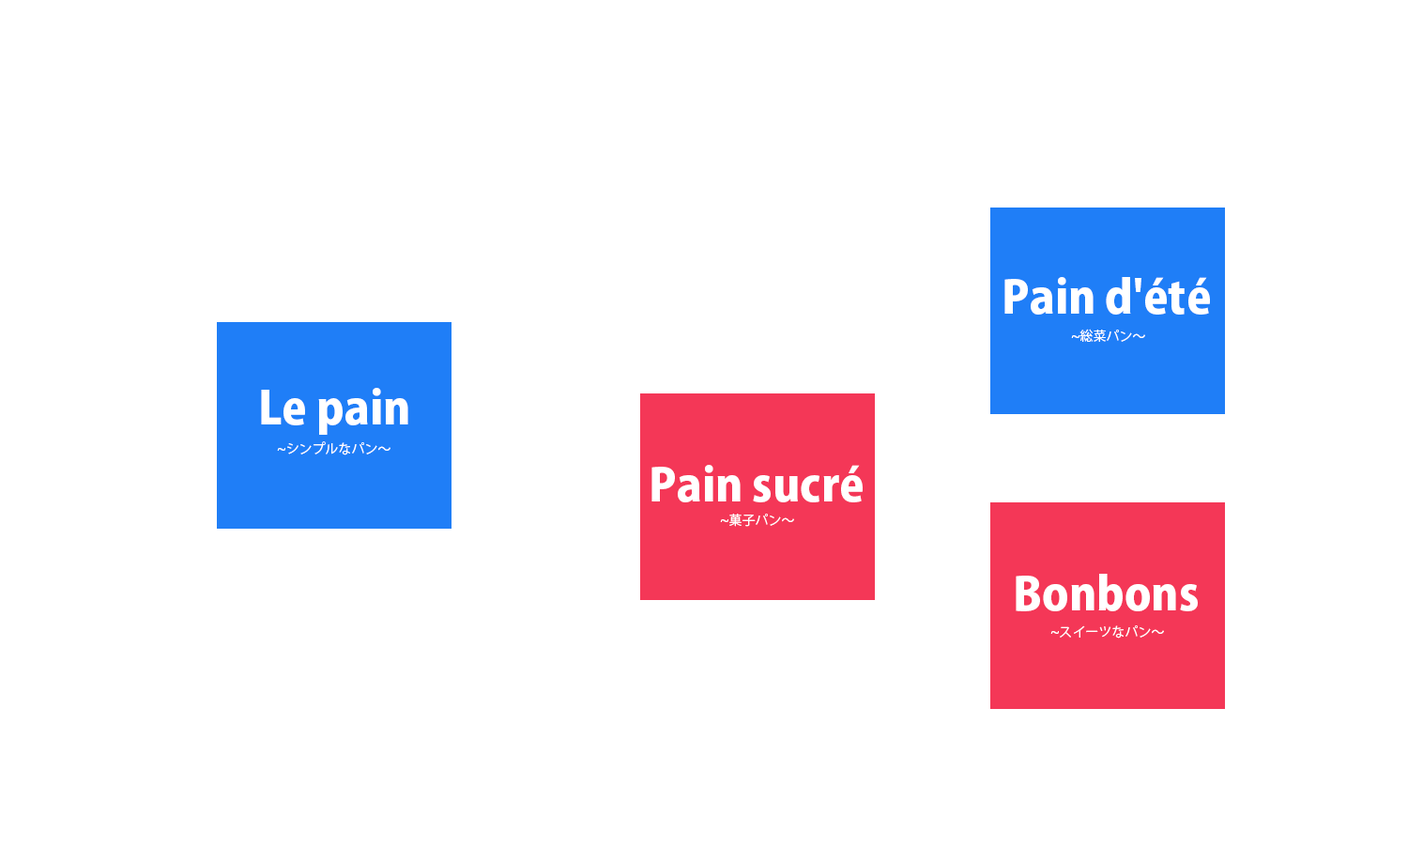
<style>
.page{position:relative;width:1408px;height:847px;background:#ffffff}
.page>*{position:absolute;margin:0}
.t1{font:45.1px "KozGoPr6N-Heavy";color:#ffffff}
.t2{font:13.1px "KozGoPr6N-Regular";color:#ffffff}
</style>
<div class="page">
<p class="t1" style="left:1005px;top:277px;width:205px;height:37px">Pain d'été</p>
<p class="t2" style="left:1071px;top:329px;width:74px;height:13px">~総菜パン～</p>
<p class="t1" style="left:261px;top:388px;width:147px;height:47px">Le pain</p>
<p class="t2" style="left:277px;top:441px;width:114px;height:14px">~シンプルなパン～</p>
<p class="t1" style="left:652px;top:465px;width:211px;height:37px">Pain sucré</p>
<p class="t2" style="left:720px;top:514px;width:74px;height:13px">~菓子パン～</p>
<p class="t1" style="left:1016px;top:574px;width:182px;height:37px">Bonbons</p>
<p class="t2" style="left:1051px;top:625px;width:113px;height:13px">~スイーツなパン～</p>
</div>
